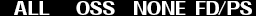
<style>
.page{position:relative;width:256px;height:16px;background:#000000}
.page>*{position:absolute;margin:0}
.t1{font:17px "FolkPro-Heavy";color:#ffffff}
</style>
<div class="page">
<p class="t1" style="left:14px;top:1px;width:36px;height:14px">ALL</p>
<p class="t1" style="left:76px;top:1px;width:39px;height:14px">OSS</p>
<p class="t1" style="left:134px;top:1px;width:52px;height:14px">NONE</p>
<p class="t1" style="left:196px;top:1px;width:56px;height:14px">FD/PS</p>
</div>
